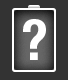
<style>
.page{position:relative;width:68px;height:80px;background:#333333}
.page>*{position:absolute;margin:0}
.t1{font:56px "HelveticaNeue-BoldCond";color:#ffffff}
</style>
<div class="page">
<p class="t1" style="left:23px;top:19px;width:23px;height:41px">?</p>
</div>
